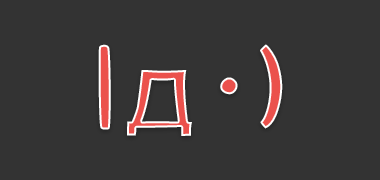
<style>
.page{position:relative;width:380px;height:180px;background:#333333}
.page>*{position:absolute;margin:0}
.t1{font:100px "KFhimaji";letter-spacing:-0.06em}
</style>
<div class="page">
<p class="t1" style="left:98px;top:44px;width:185px;height:92px">|д·)</p>
</div>
